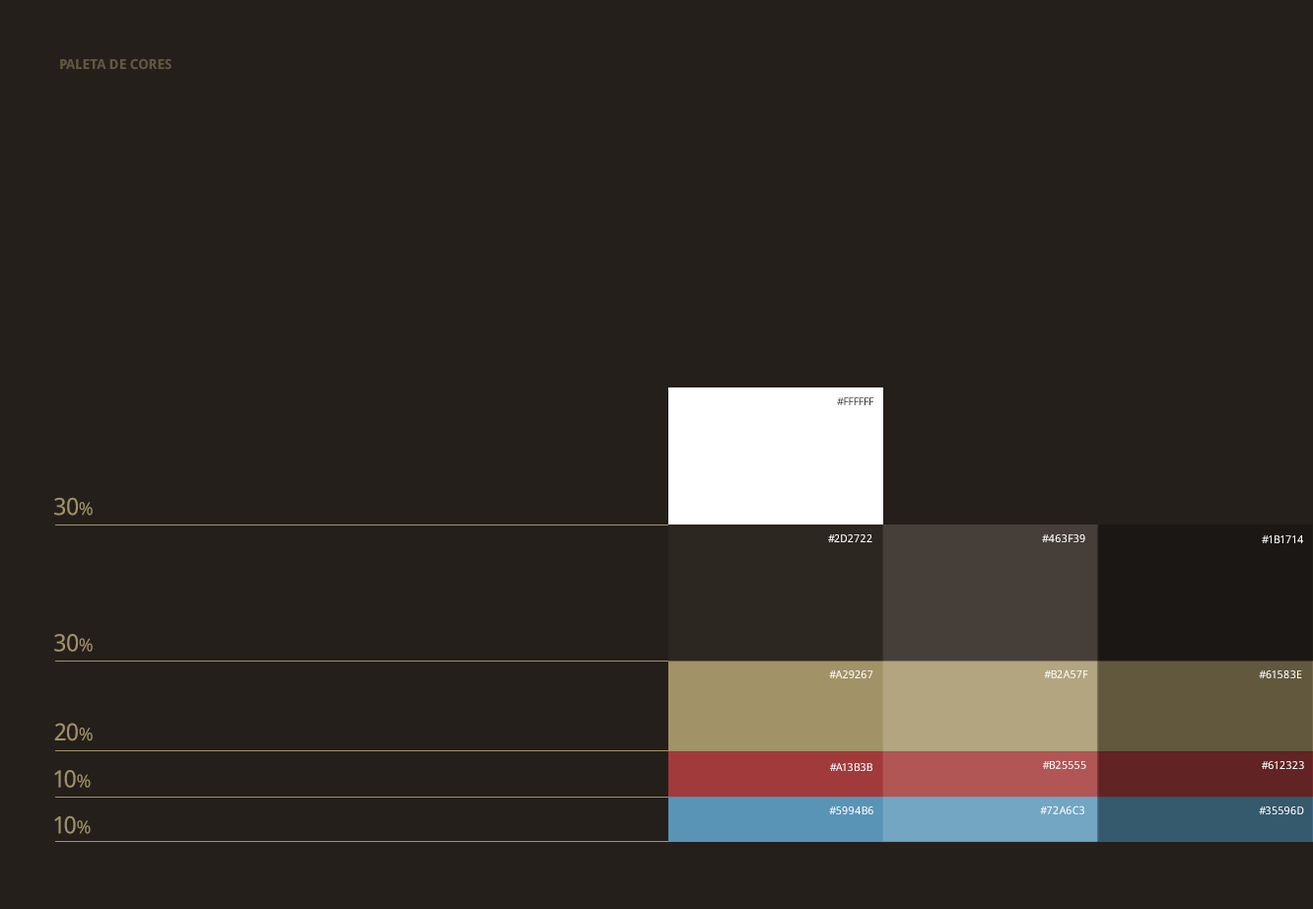
<style>
.page{position:relative;width:1313px;height:909px;background:#241f1b}
.page>*{position:absolute;margin:0}
.t1{font:13.8px "DroidSans-Bold";letter-spacing:-0.025em;color:#61583e;text-transform:uppercase}
.t2{font:10.8px "DroidSans";letter-spacing:-0.025em;color:#39332d;text-transform:uppercase}
.t3{font:23.6px "DroidSans";letter-spacing:-0.025em;color:#a29267;text-transform:uppercase}
.t4{font:17.7px "DroidSans";letter-spacing:-0.025em;color:#a29267}
.t5{font:10.8px "DroidSans";letter-spacing:-0.025em;color:#ffffff;text-transform:uppercase}
.t6{font:17.7px "DroidSans";letter-spacing:-0.025em;color:#a29267;text-transform:uppercase}
</style>
<div class="page">
<p class="t1" style="left:60px;top:58px;width:111px;height:12px">PALETA DE CORES</p>
<p class="t2" style="left:837px;top:397px;width:37px;height:8px">#FFFFFF</p>
<p class="t3" style="left:54px;top:497px;width:39px;height:18px">30<span class="t4">%</span></p>
<p class="t5" style="left:828px;top:534px;width:44px;height:8px">#2d2722</p>
<p class="t5" style="left:1042px;top:534px;width:43px;height:8px">#463f39</p>
<p class="t5" style="left:1261px;top:535px;width:42px;height:8px">#1b1714</p>
<p class="t3" style="left:54px;top:634px;width:39px;height:17px">30<span class="t4">%</span></p>
<p class="t5" style="left:829px;top:670px;width:44px;height:8px">#a29267</p>
<p class="t5" style="left:1044px;top:669px;width:44px;height:9px">#b2a57f</p>
<p class="t5" style="left:1258px;top:670px;width:44px;height:8px">#61583e</p>
<p class="t3" style="left:54px;top:722px;width:39px;height:19px">20<span class="t4">%</span></p>
<p class="t5" style="left:1043px;top:760px;width:43px;height:9px">#b25555</p>
<p class="t5" style="left:1261px;top:761px;width:43px;height:8px">#612323</p>
<p class="t3" style="left:54px;top:770px;width:37px;height:17px">10<span class="t4">%</span></p>
<p class="t5" style="left:830px;top:763px;width:42px;height:8px">#a13b3b</p>
<p class="t5" style="left:829px;top:806px;width:44px;height:8px">#5994b6</p>
<p class="t5" style="left:1040px;top:805px;width:44px;height:9px">#72a6c3</p>
<p class="t5" style="left:1258px;top:806px;width:46px;height:8px">#35596d</p>
<p class="t3" style="left:54px;top:815px;width:37px;height:19px">10<span class="t6">%</span></p>
</div>
